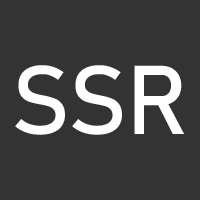
<style>
.page{position:relative;width:200px;height:200px;background:#333333}
.page>*{position:absolute;margin:0}
.t1{font:96px "Bahnschrift";color:#ffffff}
</style>
<div class="page">
<p class="t1" style="left:15px;top:65px;width:169px;height:70px">SSR</p>
</div>
